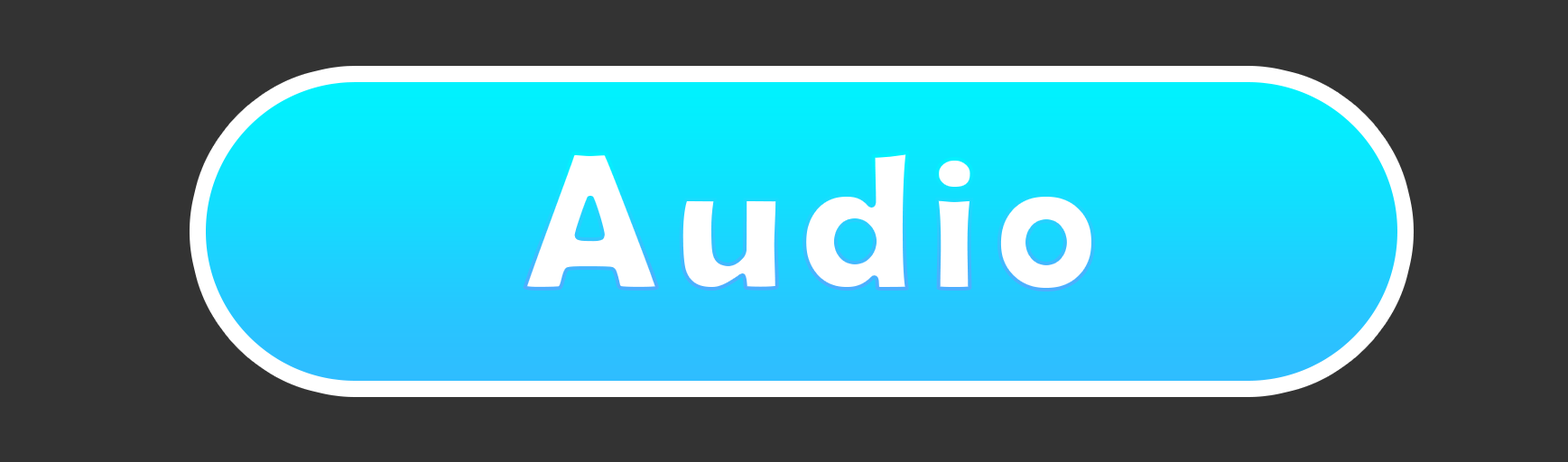
<style>
.page{position:relative;width:1568px;height:462px;background:#333333}
.page>*{position:absolute;margin:0}
.t1{font:197.6px "BerlinSansFBDemi-Bold";letter-spacing:0.06em;color:#ffffff}
</style>
<div class="page">
<p class="t1" style="left:523px;top:151px;width:572px;height:141px">Audio</p>
</div>
